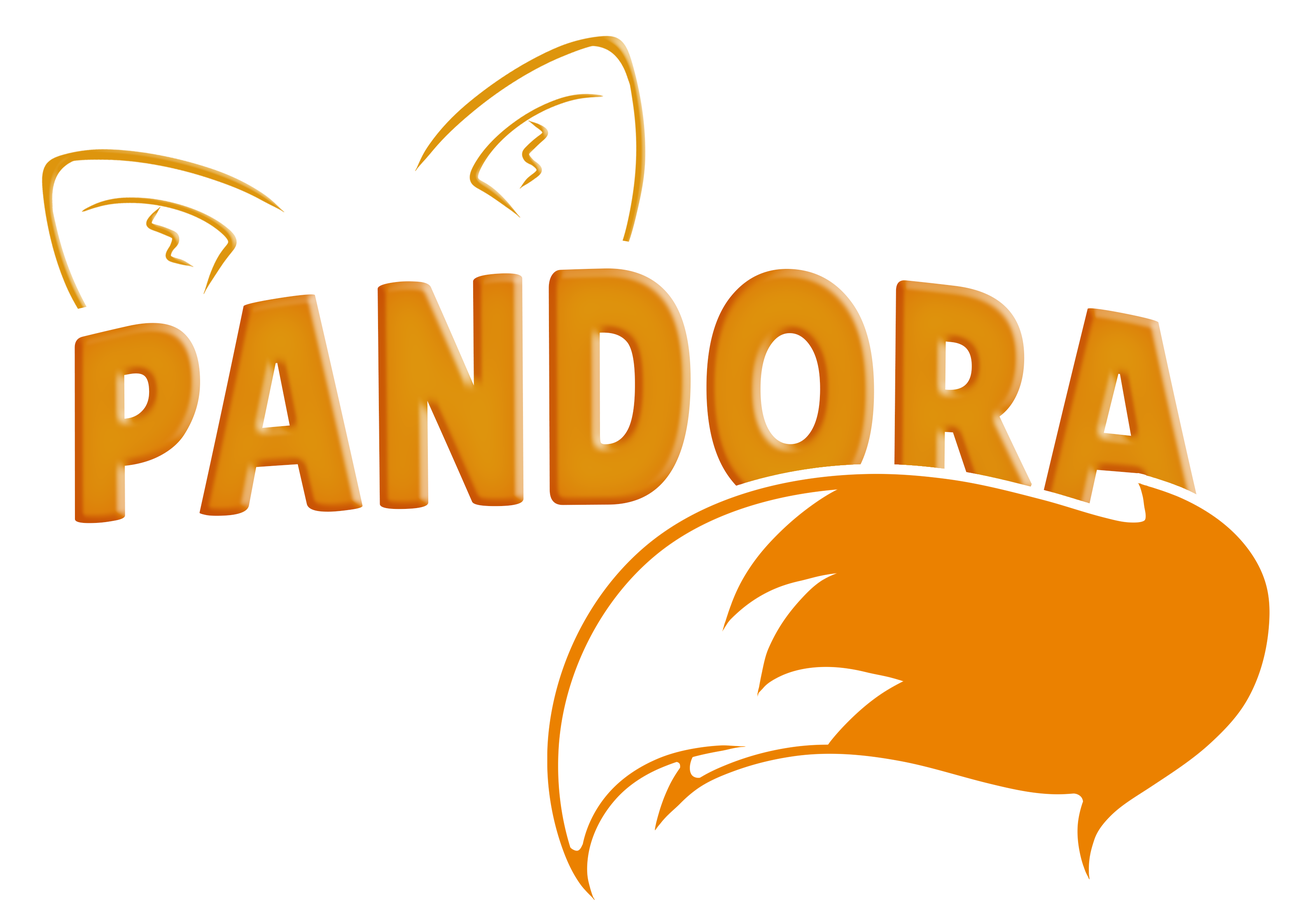
<style>
.page{position:relative;width:1298px;height:919px;background:#ffffff}
.page>*{position:absolute;margin:0}
.t1{font:261.4px "LilitaOne";color:#de950d}
.t2{font:104.6px "LilitaOne";color:#000000}
</style>
<div class="page">
<p class="t1" style="left:75px;top:268px;width:1127px;height:255px"><span class="t2">      </span>PANDORA</p>
</div>
